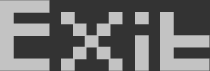
<style>
.page{position:relative;width:210px;height:71px;background:#333333}
.page>*{position:absolute;margin:0}
.t1{font:58.1px "Pixeled";color:#c3c3c3;font-weight:bold}
</style>
<div class="page">
<p class="t1" style="left:0px;top:0px;width:210px;height:71px">Exit</p>
</div>
